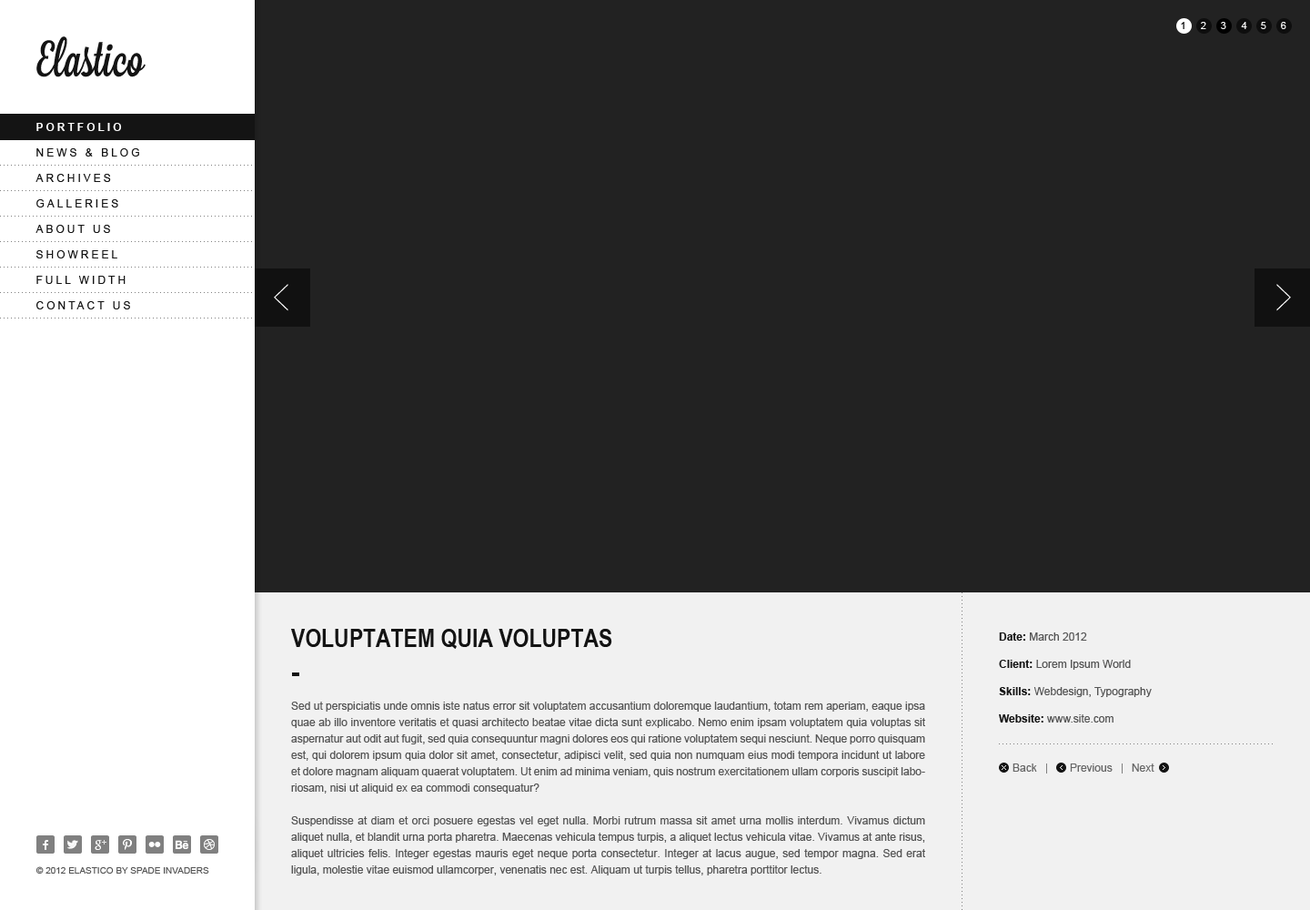
<style>
.page{position:relative;width:1310px;height:910px;background:#222222}
.page>*{position:absolute;margin:0}
.t1{font:10px "ArialMT";color:#000000}
.t2{font:10px "ArialMT";color:#ffffff}
.t3{font:10.9px "Arial-BoldMT";letter-spacing:0.25em;color:#ffffff;text-transform:uppercase}
.t4{font:10.9px "ArialMT";letter-spacing:0.25em;color:#141414;text-transform:uppercase}
.t5{font:25.5px "ArialNarrow-Bold";color:#141414;text-transform:uppercase}
.t6{font:10.9px/27.3px "ArialMT";color:#555555}
.t7{font:10.9px/27.3px "Arial-BoldMT";color:#141414}
.t8{font:10.9px/16.4px "ArialMT";color:#555555}
.t9{font:10.9px "ArialMT";color:#666666}
.t10{font:9.1px "ArialMT";color:#555555;text-transform:uppercase}
</style>
<div class="page">
<p class="t1" style="left:1181px;top:22px;width:4px;height:7px">1</p>
<p class="t2" style="left:1201px;top:22px;width:6px;height:7px">2</p>
<p class="t2" style="left:1221px;top:22px;width:6px;height:7px">3</p>
<p class="t2" style="left:1241px;top:22px;width:7px;height:7px">4</p>
<p class="t2" style="left:1261px;top:22px;width:6px;height:7px">5</p>
<p class="t2" style="left:1281px;top:22px;width:6px;height:7px">6</p>
<p class="t3" style="left:36px;top:123px;width:86px;height:8px">portfolio</p>
<p class="t4" style="left:36px;top:148px;width:103px;height:9px">news &amp; blog</p>
<p class="t4" style="left:35px;top:174px;width:76px;height:8px">archives</p>
<p class="t4" style="left:36px;top:199px;width:82px;height:8px">galleries</p>
<p class="t4" style="left:35px;top:225px;width:75px;height:8px">about us</p>
<p class="t4" style="left:36px;top:250px;width:81px;height:8px">showreel</p>
<p class="t4" style="left:36px;top:276px;width:90px;height:8px">full width</p>
<p class="t4" style="left:36px;top:301px;width:94px;height:8px">contact us</p>
<p class="t5" style="left:291px;top:629px;width:321px;height:20px">voluptatem quia voluptas</p>
<p class="t6" style="left:999px;top:632px;width:153px;height:91px"><span class="t7">Date: </span>March 2012<br><span class="t7">Client: </span>Lorem Ipsum World<br><span class="t7">Skills: </span>Webdesign, Typography<br><span class="t7">Website: </span>www.site.com</p>
<p class="t8" style="left:291px;top:702px;width:634px;height:173px;text-align:justify">Sed ut perspiciatis unde omnis iste natus error sit voluptatem accusantium doloremque laudantium, totam rem aperiam, eaque ipsa quae ab illo inventore veritatis et quasi architecto beatae vitae dicta sunt explicabo. Nemo enim ipsam voluptatem quia voluptas sit aspernatur aut odit aut fugit, sed quia consequuntur magni dolores eos qui ratione voluptatem sequi nesciunt. Neque porro quisquam est, qui dolorem ipsum quia dolor sit amet, consectetur, adipisci velit, sed quia non numquam eius modi tempora incidunt ut labore et dolore magnam aliquam quaerat voluptatem. Ut enim ad minima veniam, quis nostrum exercitationem ullam corporis suscipit laboriosam, nisi ut aliquid ex ea commodi consequatur?<br><br>Suspendisse at diam et orci posuere egestas vel eget nulla. Morbi rutrum massa sit amet urna mollis interdum. Vivamus dictum aliquet nulla, et blandit urna porta pharetra. Maecenas vehicula tempus turpis, a aliquet lectus vehicula vitae. Vivamus at ante risus, aliquet ultricies felis. Integer egestas mauris eget neque porta consectetur. Integer at lacus augue, sed tempor magna. Sed erat ligula, molestie vitae euismod ullamcorper, venenatis nec est. Aliquam ut turpis tellus, pharetra porttitor lectus.</p>
<p class="t9" style="left:1013px;top:763px;width:24px;height:9px">Back</p>
<p class="t9" style="left:1070px;top:763px;width:43px;height:9px">Previous</p>
<p class="t9" style="left:1132px;top:763px;width:23px;height:9px">Next</p>
<p class="t10" style="left:35px;top:866px;width:174px;height:8px">© 2012 elastico by spade invaders</p>
</div>
